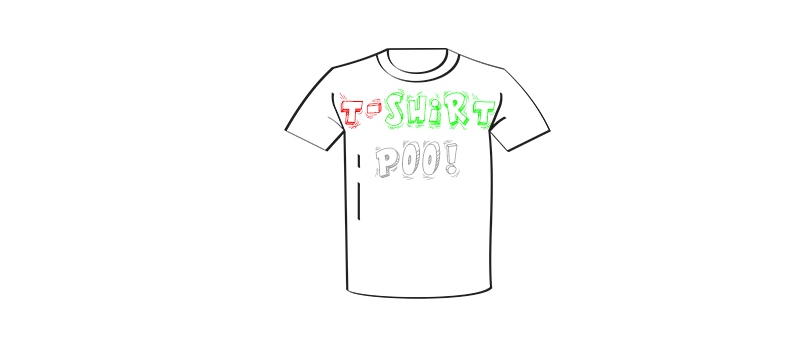
<style>
.page{position:relative;width:800px;height:350px;background:#ffffff}
.page>*{position:absolute;margin:0}
.t1{font:21px "GoodMorning";letter-spacing:0.045em;color:#0cff00}
.t2{font:21px "GoodMorning";letter-spacing:0.045em;color:#ff0000}
.t3{font:21px "GoodMorning";letter-spacing:0.045em;color:#9f9f9f}
</style>
<div class="page">
<p class="t1" style="left:339px;top:89px;width:157px;height:91px;text-align:center"><span class="t2">T-</span>SHIRT <br><span class="t3"><br>POO!</span></p>
</div>
